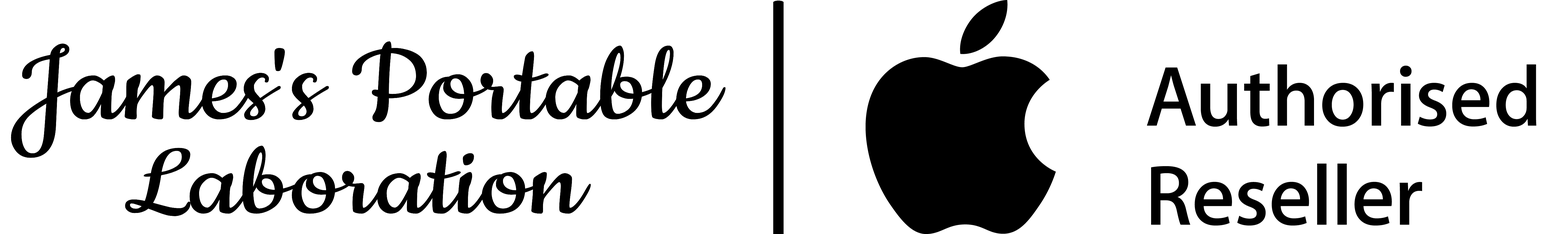
<style>
.page{position:relative;width:1568px;height:234px;background:#ffffff}
.page>*{position:absolute;margin:0}
.t1{font:121.6px "Cookie-Regular";color:#000000;scale:1.17 1}
.t2{font:112px "Cookie-Regular";color:#000000;scale:1.23 1}
</style>
<div class="page">
<p class="t1" style="left:11px;top:41px;width:714px;height:117px">James's Portable</p>
<p class="t2" style="left:125px;top:145px;width:466px;height:71px">Laboration</p>
</div>
